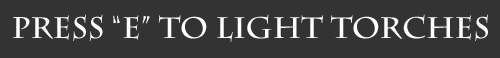
<style>
.page{position:relative;width:500px;height:58px;background:#333333}
.page>*{position:absolute;margin:0}
.t1{font:29.6px "CharlemagneStd-Bold";color:#ffffff}
</style>
<div class="page">
<p class="t1" style="left:13px;top:14px;width:475px;height:28px">Press “E” to light torches</p>
</div>
